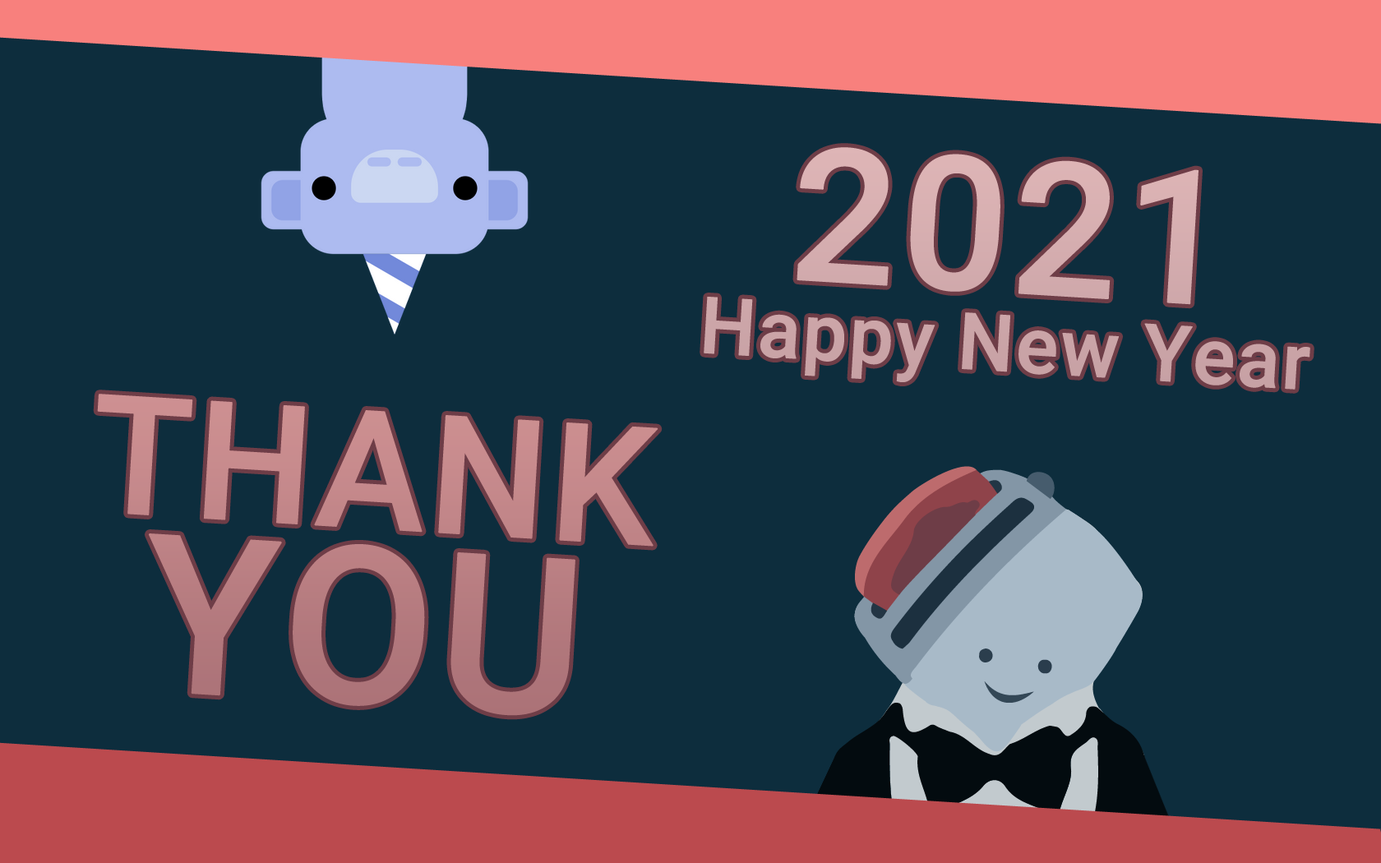
<style>
.page{position:relative;width:1381px;height:863px;background:#0d2d3d}
.page>*{position:absolute;margin:0}
.t1{font:78.9px/78.9px "Roboto-Medium";color:#d2abad;font-weight:bold}
.t2{font:186.4px/78.9px "Roboto-Medium";color:#d2abad;font-weight:bold}
.t3{font:164.4px/175.4px "Roboto-Medium";color:#bf8386;font-weight:bold}
.t4{font:219.2px/175.4px "Roboto-Medium";color:#bf8386;font-weight:bold}
</style>
<div class="page">
<p class="t1" style="left:704px;top:147px;width:607px;height:243px;text-align:center;rotate:3deg"><span class="t2">2021<br></span>Happy New Year</p>
<p class="t3" style="left:97px;top:394px;width:562px;height:322px;text-align:center;rotate:3deg">THANK<br><span class="t4">YOU</span></p>
</div>
